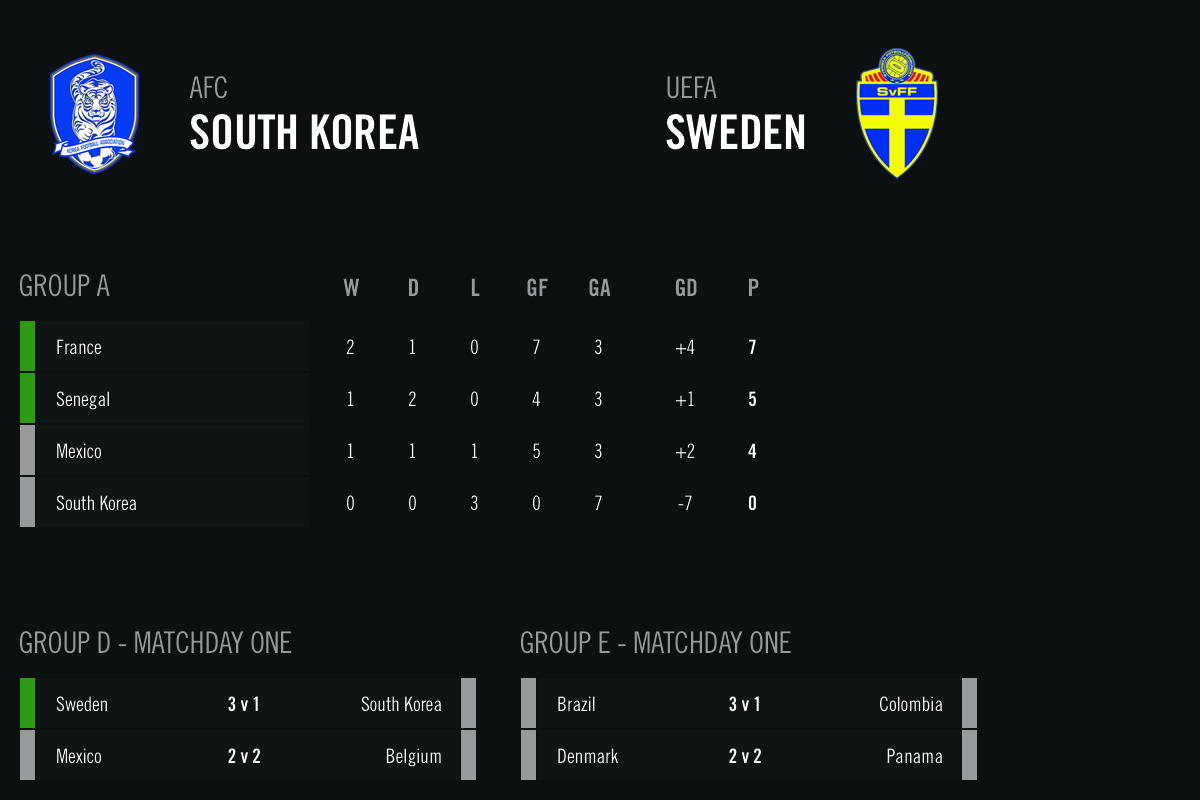
<style>
.page{position:relative;width:1200px;height:800px;background:#0d1010}
.page>*{position:absolute;margin:0}
.t1{font:30px "TradeGothicLTStd-Cn18";letter-spacing:-0.01em;color:#979a9c}
.t2{font:48px "TradeGothicLTStd-BdCn20";letter-spacing:-0.01em;color:#ffffff}
.t3{font:24px "TradeGothicLTStd-BdCn20";letter-spacing:-0.01em;color:#979a9c}
.t4{font:20px "TradeGothicLTStd-Cn18";letter-spacing:-0.01em;color:#ffffff}
.t5{font:20px "TradeGothicLTStd-BdCn20";letter-spacing:-0.01em;color:#ffffff}
</style>
<div class="page">
<p class="t1" style="left:189px;top:76px;width:38px;height:23px">AFC</p>
<p class="t1" style="left:667px;top:76px;width:50px;height:23px">UEFA</p>
<p class="t2" style="left:190px;top:113px;width:229px;height:37px">SOUTH KOREA</p>
<p class="t2" style="left:666px;top:113px;width:139px;height:37px">SWEDEN</p>
<p class="t1" style="left:19px;top:274px;width:91px;height:23px">GROUP A</p>
<p class="t3" style="left:343px;top:278px;width:16px;height:18px">W</p>
<p class="t3" style="left:408px;top:278px;width:11px;height:18px">D</p>
<p class="t3" style="left:471px;top:278px;width:9px;height:18px">L</p>
<p class="t3" style="left:527px;top:278px;width:21px;height:19px">GF</p>
<p class="t3" style="left:589px;top:278px;width:22px;height:19px">GA</p>
<p class="t3" style="left:675px;top:278px;width:22px;height:19px">GD</p>
<p class="t3" style="left:748px;top:278px;width:11px;height:18px">P</p>
<p class="t4" style="left:57px;top:339px;width:45px;height:16px">France</p>
<p class="t4" style="left:346px;top:339px;width:8px;height:15px">2</p>
<p class="t4" style="left:410px;top:339px;width:5px;height:15px">1</p>
<p class="t4" style="left:471px;top:339px;width:7px;height:16px">0</p>
<p class="t4" style="left:533px;top:339px;width:7px;height:15px">7</p>
<p class="t4" style="left:594px;top:339px;width:8px;height:16px">3</p>
<p class="t4" style="left:675px;top:339px;width:20px;height:15px">+4</p>
<p class="t5" style="left:749px;top:339px;width:7px;height:15px">7</p>
<p class="t4" style="left:56px;top:391px;width:53px;height:19px">Senegal</p>
<p class="t4" style="left:348px;top:391px;width:5px;height:15px">1</p>
<p class="t4" style="left:408px;top:391px;width:8px;height:15px">2</p>
<p class="t4" style="left:471px;top:391px;width:7px;height:16px">0</p>
<p class="t4" style="left:532px;top:391px;width:8px;height:15px">4</p>
<p class="t4" style="left:594px;top:391px;width:8px;height:16px">3</p>
<p class="t4" style="left:675px;top:391px;width:19px;height:15px">+1</p>
<p class="t5" style="left:749px;top:391px;width:7px;height:16px">5</p>
<p class="t4" style="left:57px;top:443px;width:44px;height:16px">Mexico</p>
<p class="t4" style="left:348px;top:443px;width:5px;height:15px">1</p>
<p class="t4" style="left:410px;top:443px;width:5px;height:15px">1</p>
<p class="t4" style="left:472px;top:443px;width:5px;height:15px">1</p>
<p class="t4" style="left:533px;top:443px;width:7px;height:16px">5</p>
<p class="t4" style="left:594px;top:443px;width:8px;height:16px">3</p>
<p class="t4" style="left:675px;top:443px;width:20px;height:15px">+2</p>
<p class="t5" style="left:748px;top:443px;width:9px;height:15px">4</p>
<p class="t4" style="left:56px;top:495px;width:80px;height:16px">South Korea</p>
<p class="t4" style="left:347px;top:495px;width:7px;height:16px">0</p>
<p class="t4" style="left:409px;top:495px;width:7px;height:16px">0</p>
<p class="t4" style="left:470px;top:495px;width:8px;height:16px">3</p>
<p class="t4" style="left:533px;top:495px;width:7px;height:16px">0</p>
<p class="t4" style="left:595px;top:495px;width:7px;height:15px">7</p>
<p class="t4" style="left:678px;top:495px;width:14px;height:15px">-7</p>
<p class="t5" style="left:748px;top:495px;width:8px;height:16px">0</p>
<p class="t1" style="left:19px;top:631px;width:273px;height:23px">GROUP D - MATCHDAY ONE</p>
<p class="t1" style="left:520px;top:631px;width:271px;height:23px">GROUP E - MATCHDAY ONE</p>
<p class="t4" style="left:56px;top:696px;width:51px;height:16px">Sweden</p>
<p class="t5" style="left:228px;top:696px;width:30px;height:16px">3 v 1</p>
<p class="t4" style="left:361px;top:696px;width:80px;height:16px">South Korea</p>
<p class="t4" style="left:558px;top:696px;width:37px;height:16px">Brazil</p>
<p class="t5" style="left:729px;top:696px;width:30px;height:16px">3 v 1</p>
<p class="t4" style="left:879px;top:696px;width:63px;height:16px">Colombia</p>
<p class="t4" style="left:57px;top:748px;width:44px;height:16px">Mexico</p>
<p class="t5" style="left:228px;top:748px;width:32px;height:15px">2 v 2</p>
<p class="t4" style="left:386px;top:748px;width:55px;height:19px">Belgium</p>
<p class="t4" style="left:558px;top:748px;width:60px;height:16px">Denmark</p>
<p class="t5" style="left:729px;top:748px;width:32px;height:15px">2 v 2</p>
<p class="t4" style="left:887px;top:748px;width:55px;height:16px">Panama</p>
</div>
